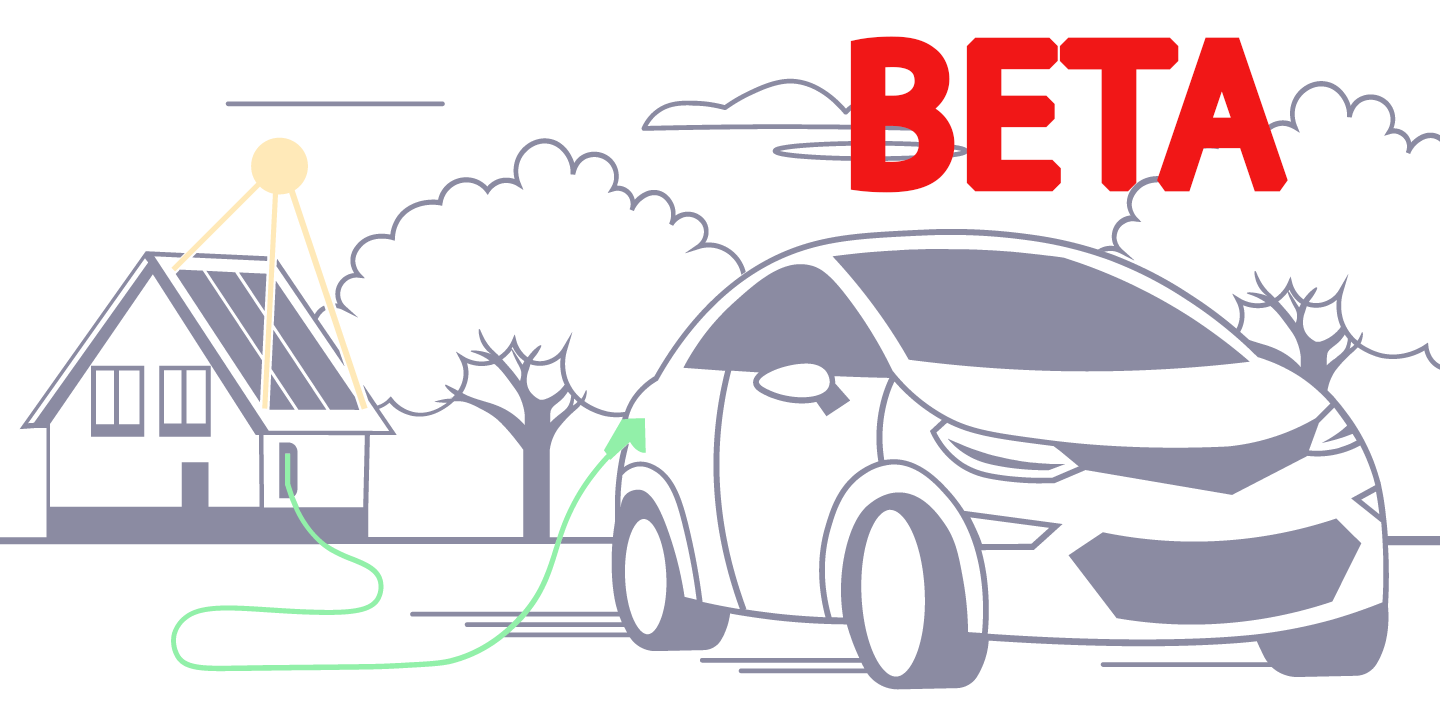
<style>
.page{position:relative;width:1440px;height:720px;background:#ffffff}
.page>*{position:absolute;margin:0}
.t1{font:203.5px "MyriadPro-Regular";color:#f11717;font-weight:bold}
</style>
<div class="page">
<p class="t1" style="left:850px;top:36px;width:438px;height:157px">BETA</p>
</div>
